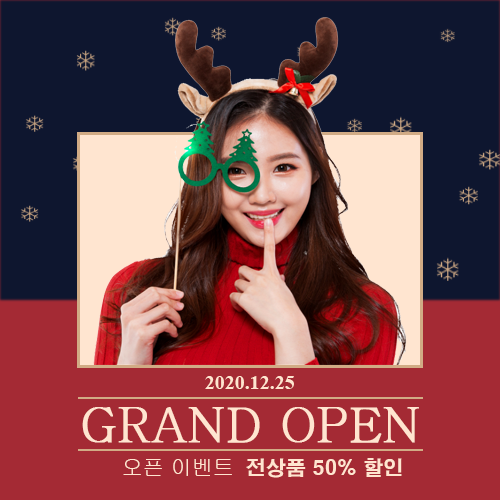
<style>
.page{position:relative;width:500px;height:500px;background:#0e162f}
.page>*{position:absolute;margin:0}
.t1{font:20px "TimesNewRomanPS-BoldMT";color:#ffe5d0}
.t2{font:48px "Batang";color:#ffe5d0;font-weight:bold}
.t3{font:21px "Gulim";color:#ffe5d0}
.t4{font:20px "H2gtrE";color:#ffe5d0}
</style>
<div class="page">
<p class="t1" style="left:205px;top:376px;width:89px;height:13px">2020.12.25</p>
<p class="t2" style="left:82px;top:407px;width:337px;height:36px">GRAND OPEN</p>
<p class="t3" style="left:123px;top:459px;width:109px;height:17px">오픈 이벤트</p>
<p class="t4" style="left:246px;top:458px;width:156px;height:20px">전상품 50% 할인</p>
</div>
